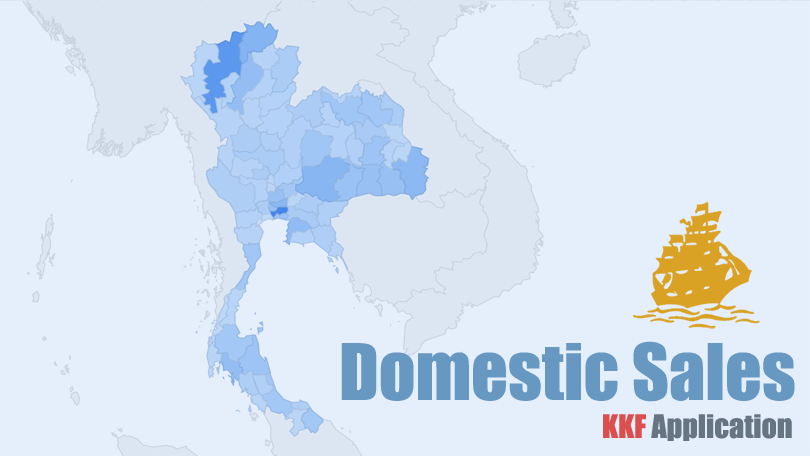
<style>
.page{position:relative;width:810px;height:456px;background:#e5effc}
.page>*{position:absolute;margin:0}
.t1{font:72px "Impact";color:#6798c2}
.t2{font:30px "Impact";color:#677582}
.t3{font:30px "Impact";color:#dc4f4f}
</style>
<div class="page">
<p class="t1" style="left:341px;top:341px;width:454px;height:61px">Domestic Sales</p>
<p class="t2" style="left:603px;top:414px;width:189px;height:27px"><span class="t3">KKF </span>Application</p>
</div>
